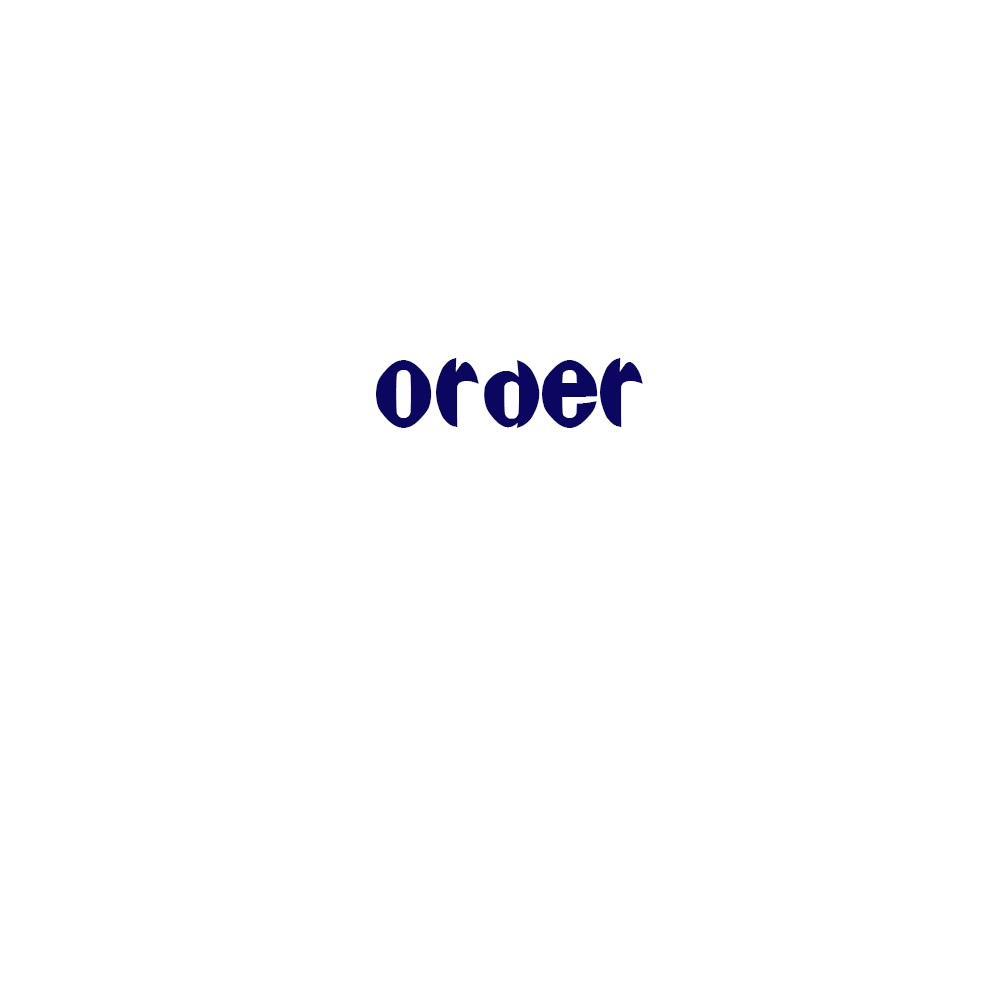
<style>
.page{position:relative;width:1000px;height:1000px;background:#ffffff}
.page>*{position:absolute;margin:0}
.t1{font:72px "Aragones";color:#0b0761}
</style>
<div class="page">
<p class="t1" style="left:376px;top:358px;width:267px;height:70px">order</p>
</div>
